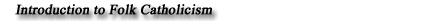
<style>
.page{position:relative;width:447px;height:21px;background:#ffffff}
.page>*{position:absolute;margin:0}
.t1{font:14px "TimesNewRomanPSMT";color:#020202;font-weight:bold;font-style:italic}
</style>
<div class="page">
<p class="t1" style="left:15px;top:4px;width:197px;height:11px">Introduction to Folk Catholicism</p>
</div>
